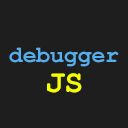
<style>
.page{position:relative;width:128px;height:128px;background:#1e1e1e}
.page>*{position:absolute;margin:0}
.t1{font:23px "CourierNewPS-BoldMT";color:#56afeb}
.t2{font:32.2px "CourierNewPS-BoldMT";color:#f6ff00}
</style>
<div class="page">
<p class="t1" style="left:9px;top:47px;width:110px;height:20px">debugger</p>
<p class="t2" style="left:47px;top:73px;width:35px;height:20px">JS</p>
</div>
